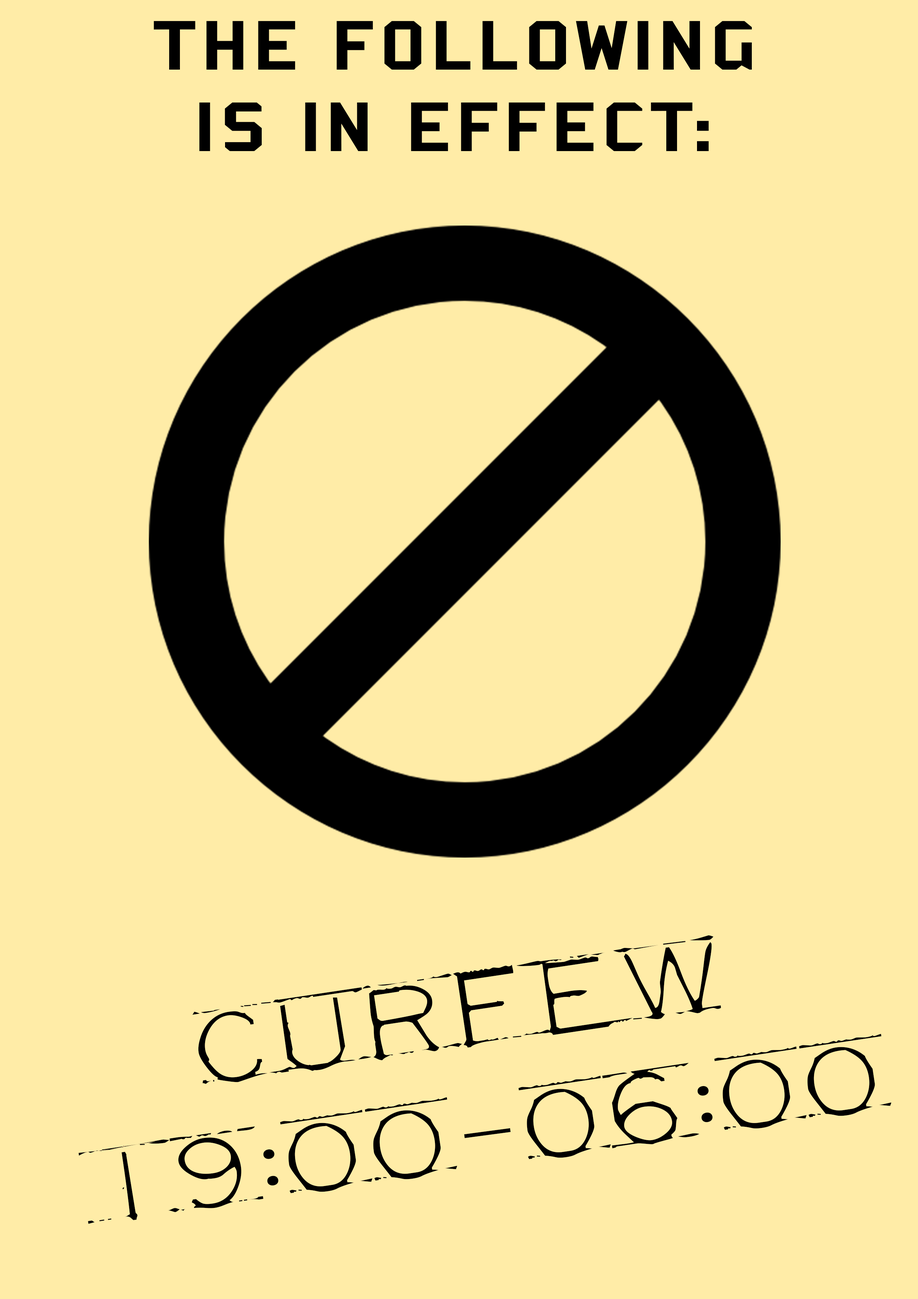
<style>
.page{position:relative;width:918px;height:1299px;background:#ffeca7}
.page>*{position:absolute;margin:0}
.t1{font:75.9px "Bombardier";letter-spacing:0.06em;color:#000000;scale:1.22 1}
.t2{font:75.9px "MechanicalFun";letter-spacing:0.06em;color:#000000;scale:1.22 1}
.t3{font:75.9px "MyriadPro-Regular";letter-spacing:0.06em;color:#000000;scale:1.22 1}
</style>
<div class="page">
<p class="t1" style="left:154px;top:21px;width:598px;height:49px">THE FOLLOWING</p>
<p class="t1" style="left:199px;top:102px;width:510px;height:49px">IS IN EFFECT:</p>
<p class="t2" style="left:192px;top:935px;width:529px;height:149px;rotate:-8deg">CURFEW</p>
<p class="t2" style="left:518px;top:1034px;width:373px;height:125px;rotate:-8deg">06<span class="t3">:</span>00</p>
<p class="t2" style="left:78px;top:1097px;width:379px;height:127px;rotate:-8deg">19<span class="t3">:</span>00</p>
<p class="t3" style="left:464px;top:1128px;width:47px;height:10px;rotate:-8deg">_</p>
</div>
